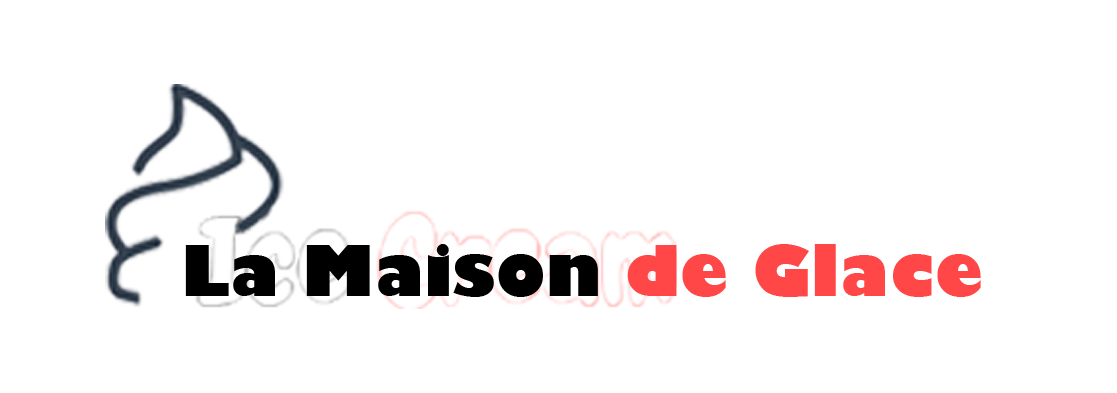
<style>
.page{position:relative;width:1117px;height:393px;background:#ffffff}
.page>*{position:absolute;margin:0}
.t1{font:69.5px "GillSans-UltraBold";color:#000000}
.t2{font:69.5px "GillSans-UltraBold";color:#ff4747}
</style>
<div class="page">
<p class="t1" style="left:185px;top:244px;width:796px;height:53px">La Maison <span class="t2">de Glace</span></p>
</div>
